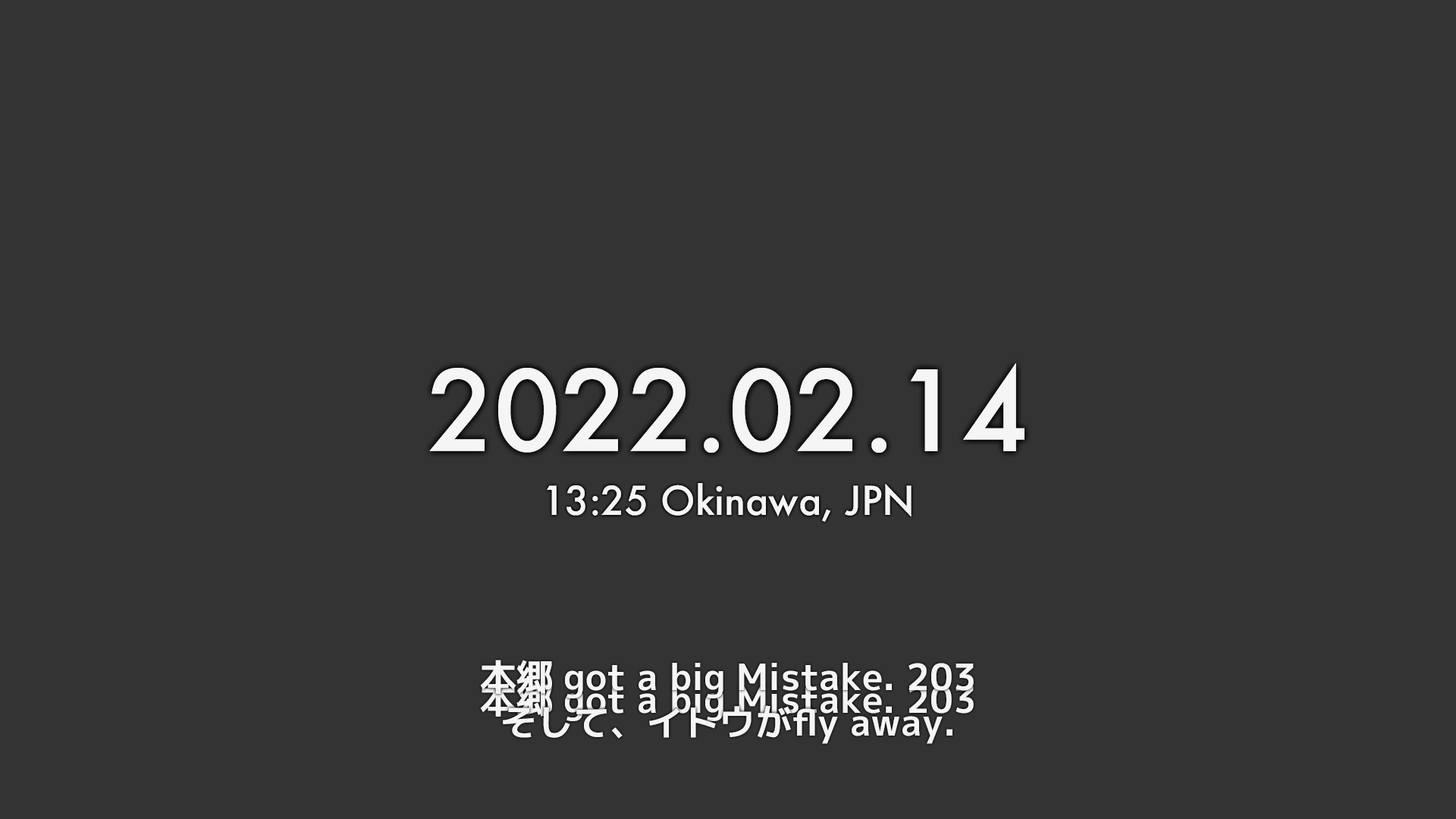
<style>
.page{position:relative;width:1456px;height:819px;background:#333333}
.page>*{position:absolute;margin:0}
.t1{font:108.4px "Futura-Medium";color:#f5f5f5}
.t2{font:38.7px "Futura-Medium";color:#f5f5f5}
.t3{font:36.4px/45.5px "mplus-1p-bold";color:#f5f5f5}
.t4{font:36.4px "mplus-1p-bold";color:#f5f5f5}
</style>
<div class="page">
<p class="t1" style="left:429px;top:363px;width:595px;height:90px">2022.02.14</p>
<p class="t1" style="left:429px;top:363px;width:595px;height:90px">2022.02.14</p>
<p class="t2" style="left:547px;top:483px;width:365px;height:39px">13:25 Okinawa, JPN</p>
<p class="t2" style="left:547px;top:483px;width:365px;height:39px">13:25 Okinawa, JPN</p>
<p class="t3" style="left:480px;top:660px;width:494px;height:84px;text-align:center">本郷 got a big Mistake. 203<br>そして、イトウがfly away.</p>
<p class="t4" style="left:480px;top:682px;width:494px;height:39px">本郷 got a big Mistake. 203</p>
</div>
